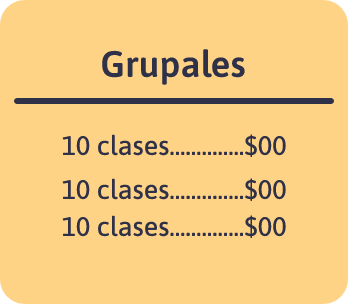
<style>
.page{position:relative;width:348px;height:305px;background:#ffd386}
.page>*{position:absolute;margin:0}
.t1{font:37px "Asap-SemiBold";color:#2f3148}
.t2{font:27px "Asap-Medium";color:#2f3148}
</style>
<div class="page">
<p class="t1" style="left:102px;top:49px;width:143px;height:36px">Grupales</p>
<p class="t2" style="left:62px;top:134px;width:224px;height:23px">10 clases..............$00</p>
<p class="t2" style="left:62px;top:178px;width:224px;height:23px">10 clases..............$00</p>
<p class="t2" style="left:62px;top:215px;width:224px;height:23px">10 clases..............$00</p>
</div>
